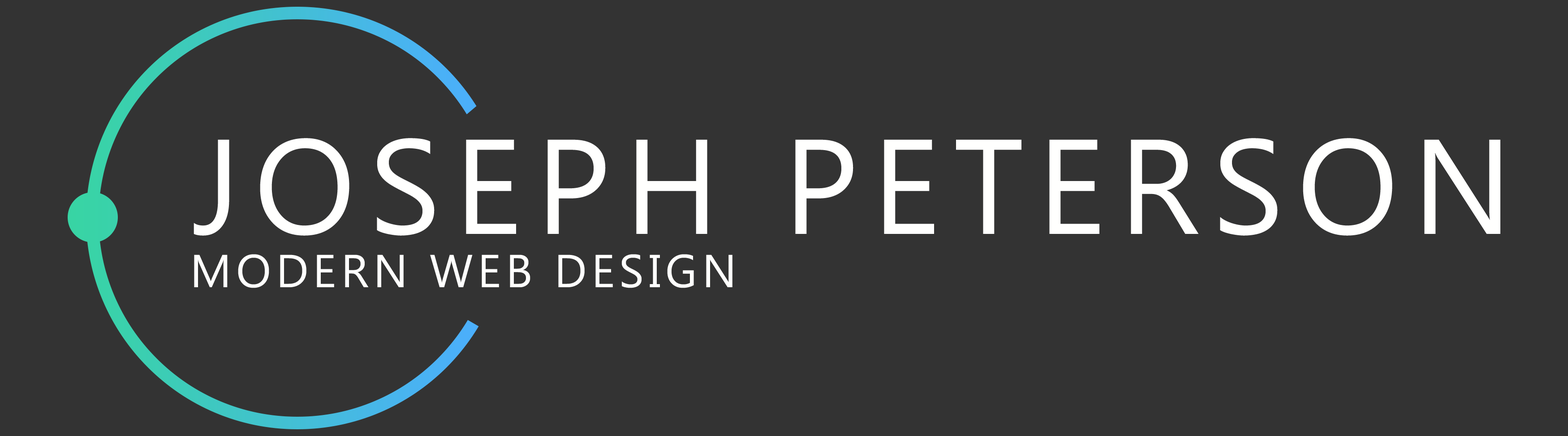
<style>
.page{position:relative;width:1568px;height:436px;background:#333333}
.page>*{position:absolute;margin:0}
.t1{font:134.4px "MicrosoftTaiLe";letter-spacing:0.1em;color:#fffffe}
.t2{font:46.3px "MicrosoftTaiLe";letter-spacing:0.1em;color:#fffffe}
</style>
<div class="page">
<p class="t1" style="left:194px;top:138px;width:1306px;height:98px">JOSEPH PETERSON</p>
<p class="t2" style="left:194px;top:254px;width:538px;height:34px">MODERN WEB DESIGN</p>
</div>
